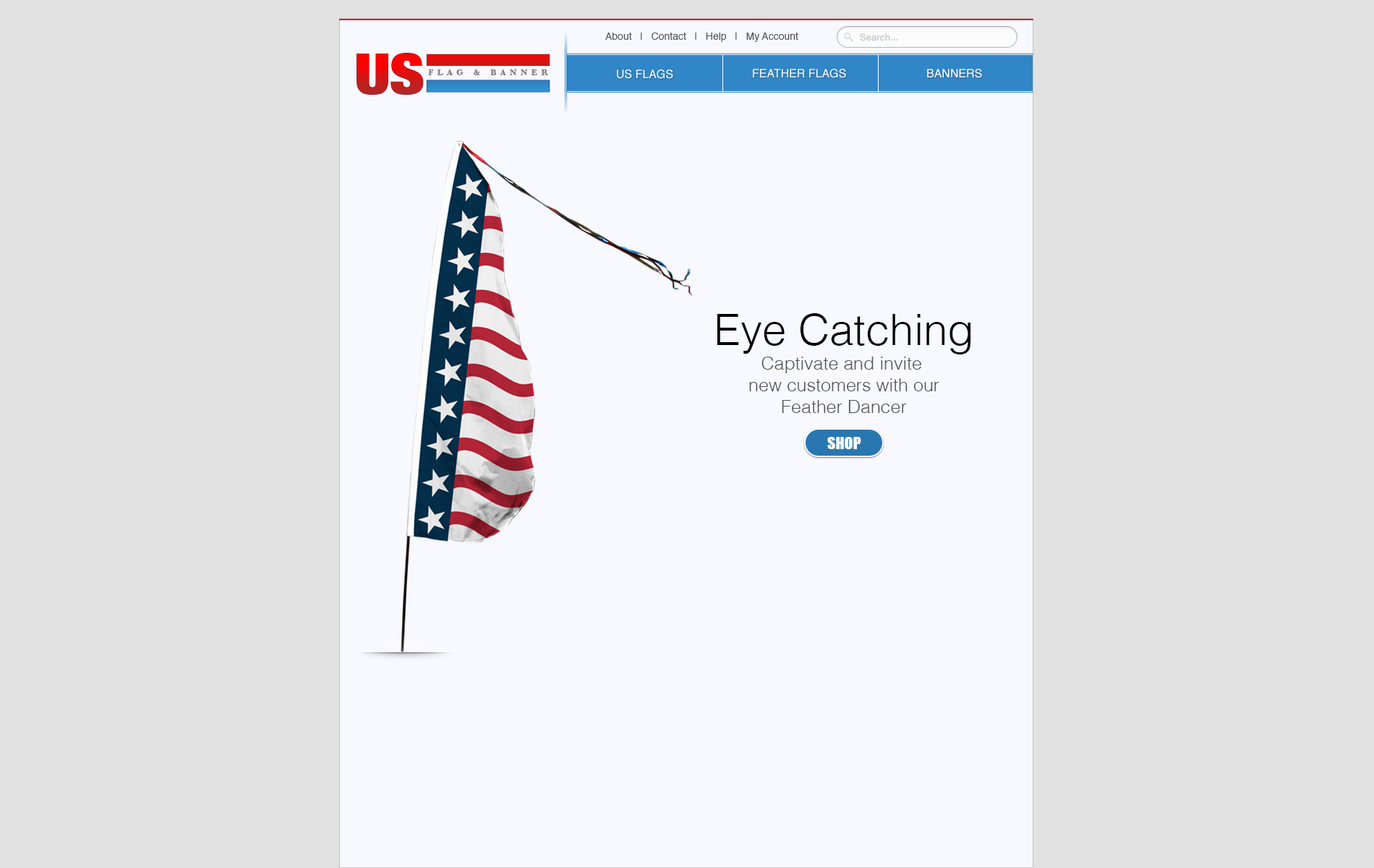
<style>
.page{position:relative;width:1374px;height:868px;background:#e1e1e1}
.page>*{position:absolute;margin:0}
.t1{font:10.1px "Helvetica";color:#555555}
.t2{font:9.4px "HelveticaNeue-Medium";color:#c2c6ca}
.t3{font:11.6px "Helvetica";color:#ffffff}
.t4{font:43.4px "Helvetica-Light";color:#000000}
.t5{font:18.1px "Helvetica-Light";color:#555555}
.t6{font:15.9px "Impact";color:#ffffff}
</style>
<div class="page">
<p class="t1" style="left:605px;top:33px;width:193px;height:9px">About   |   Contact   |   Help   |   My Account</p>
<p class="t2" style="left:860px;top:33px;width:37px;height:8px">Search...</p>
<p class="t3" style="left:617px;top:69px;width:56px;height:10px">US FLAGS</p>
<p class="t3" style="left:753px;top:69px;width:93px;height:9px">FEATHER FLAGS</p>
<p class="t3" style="left:927px;top:69px;width:55px;height:9px">BANNERS</p>
<p class="t4" style="left:717px;top:313px;width:254px;height:41px">Eye Catching</p>
<p class="t5" style="left:749px;top:357px;width:190px;height:56px;text-align:center">Captivate and invite <br>new customers with our<br>Feather Dancer</p>
<p class="t6" style="left:827px;top:437px;width:34px;height:12px">SHOP</p>
</div>
